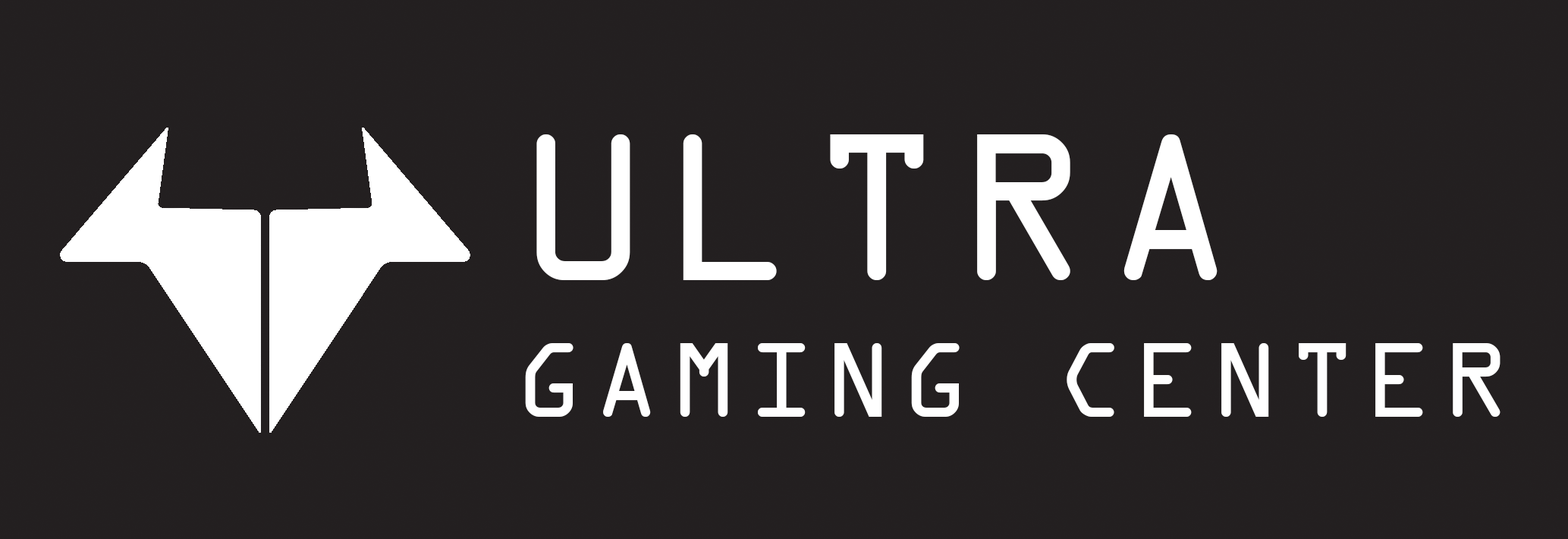
<style>
.page{position:relative;width:1568px;height:539px;background:#231f20}
.page>*{position:absolute;margin:0}
.t1{font:113.8px "OCRAExtended";letter-spacing:0.075em;color:#ffffff}
.t2{font:224.4px "OCRAExtended";letter-spacing:0.05em;color:#ffffff}
</style>
<div class="page">
<p class="t1" style="left:525px;top:134px;width:975px;height:282px"><span class="t2">ULTRA<br></span>GAMING CENTER</p>
</div>
